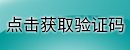
<style>
.page{position:relative;width:130px;height:50px}
.page>*{position:absolute;margin:0}
.t1{font:17px "SourceHanSansSC-Normal";color:#000000}
</style>
<div class="page">
<p class="t1" style="left:6px;top:16px;width:118px;height:17px">点击获取验证码</p>
</div>
